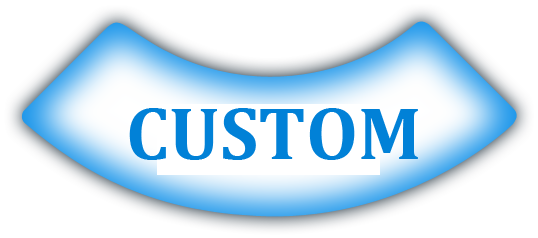
<style>
.page{position:relative;width:538px;height:238px;background:#ffffff}
.page>*{position:absolute;margin:0}
.t1{font:75px "Cambria-Bold";color:#0181d8}
</style>
<div class="page">
<p class="t1" style="left:129px;top:108px;width:289px;height:52px">CUSTOM</p>
</div>
